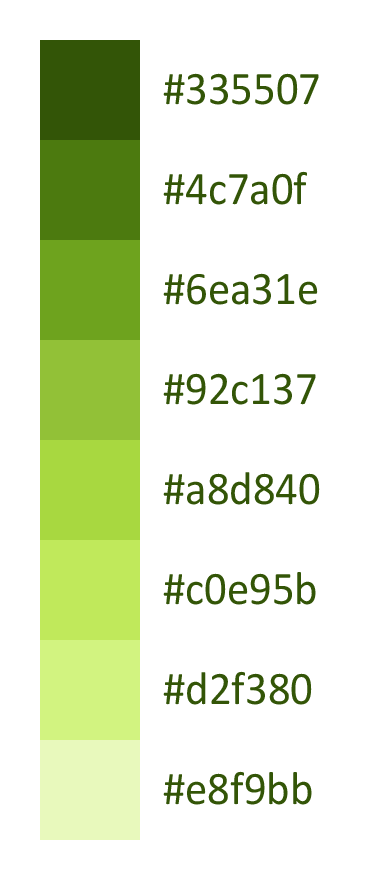
<style>
.page{position:relative;width:370px;height:880px;background:#ffffff}
.page>*{position:absolute;margin:0}
.t1{font:47px/100px "Calibri";color:#335507;scale:0.95 1}
</style>
<div class="page">
<p class="t1" style="left:163px;top:73px;width:157px;height:732px">#335507<br>#4c7a0f<br>#6ea31e<br>#92c137<br>#a8d840<br>#c0e95b<br>#d2f380<br>#e8f9bb</p>
</div>
